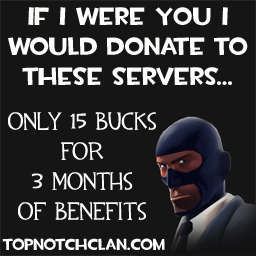
<style>
.page{position:relative;width:256px;height:256px;background:#151515}
.page>*{position:absolute;margin:0}
.t1{font:25px "TF2Build";color:#fdfcfb}
.t2{font:25px "TF2";color:#fdfcfb}
.t3{font:16px "TF2Build";color:#fdfcfb}
</style>
<div class="page">
<p class="t1" style="left:8px;top:7px;width:240px;height:78px;text-align:center">If I were You I <br>would DOnate to these servers...</p>
<p class="t2" style="left:8px;top:112px;width:148px;height:108px;text-align:center">Only 15 bucks for <br>3 months<br>of benefits</p>
<p class="t3" style="left:2px;top:238px;width:163px;height:12px">topnotchclan.com</p>
</div>
